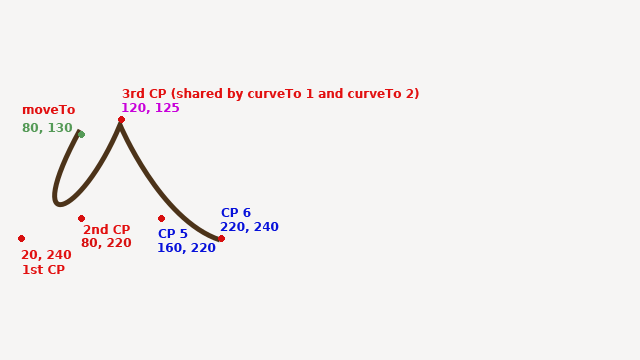
<style>
.page{position:relative;width:640px;height:360px;background:#f6f5f4}
.page>*{position:absolute;margin:0}
.t1{font:12px "DejaVuSans-Bold";color:#e21010}
.t2{font:12px "DejaVuSans-Bold";color:#c801da}
.t3{font:12px "DejaVuSans-Bold";color:#559a57}
.t4{font:12px "DejaVuSans-Bold";color:#0711da}
.t5{font:12px "DejaVuSans-Bold";color:#d81010}
</style>
<div class="page">
<p class="t1" style="left:122px;top:88px;width:297px;height:13px">3rd CP (shared by curveTo 1 and curveTo 2)</p>
<p class="t1" style="left:22px;top:105px;width:53px;height:9px">moveTo</p>
<p class="t2" style="left:122px;top:103px;width:57px;height:11px">120, 125</p>
<p class="t3" style="left:22px;top:123px;width:51px;height:11px">80, 130</p>
<p class="t4" style="left:221px;top:208px;width:30px;height:9px">CP 6</p>
<p class="t4" style="left:220px;top:222px;width:59px;height:11px">220, 240</p>
<p class="t1" style="left:83px;top:224px;width:47px;height:10px">2nd CP</p>
<p class="t4" style="left:158px;top:229px;width:30px;height:9px">CP 5</p>
<p class="t5" style="left:81px;top:238px;width:51px;height:11px">80, 220</p>
<p class="t4" style="left:158px;top:243px;width:58px;height:11px">160, 220</p>
<p class="t1" style="left:21px;top:250px;width:51px;height:11px">20, 240</p>
<p class="t1" style="left:23px;top:265px;width:42px;height:9px">1st CP</p>
</div>
